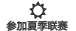
<style>
.page{position:relative;width:76px;height:31px;background:#ffffff}
.page>*{position:absolute;margin:0}
.t1{font:10px "MicrosoftYaHei";color:#333333;font-weight:bold}
</style>
<div class="page">
<p class="t1" style="left:6px;top:20px;width:62px;height:11px">参加夏季联赛</p>
</div>
